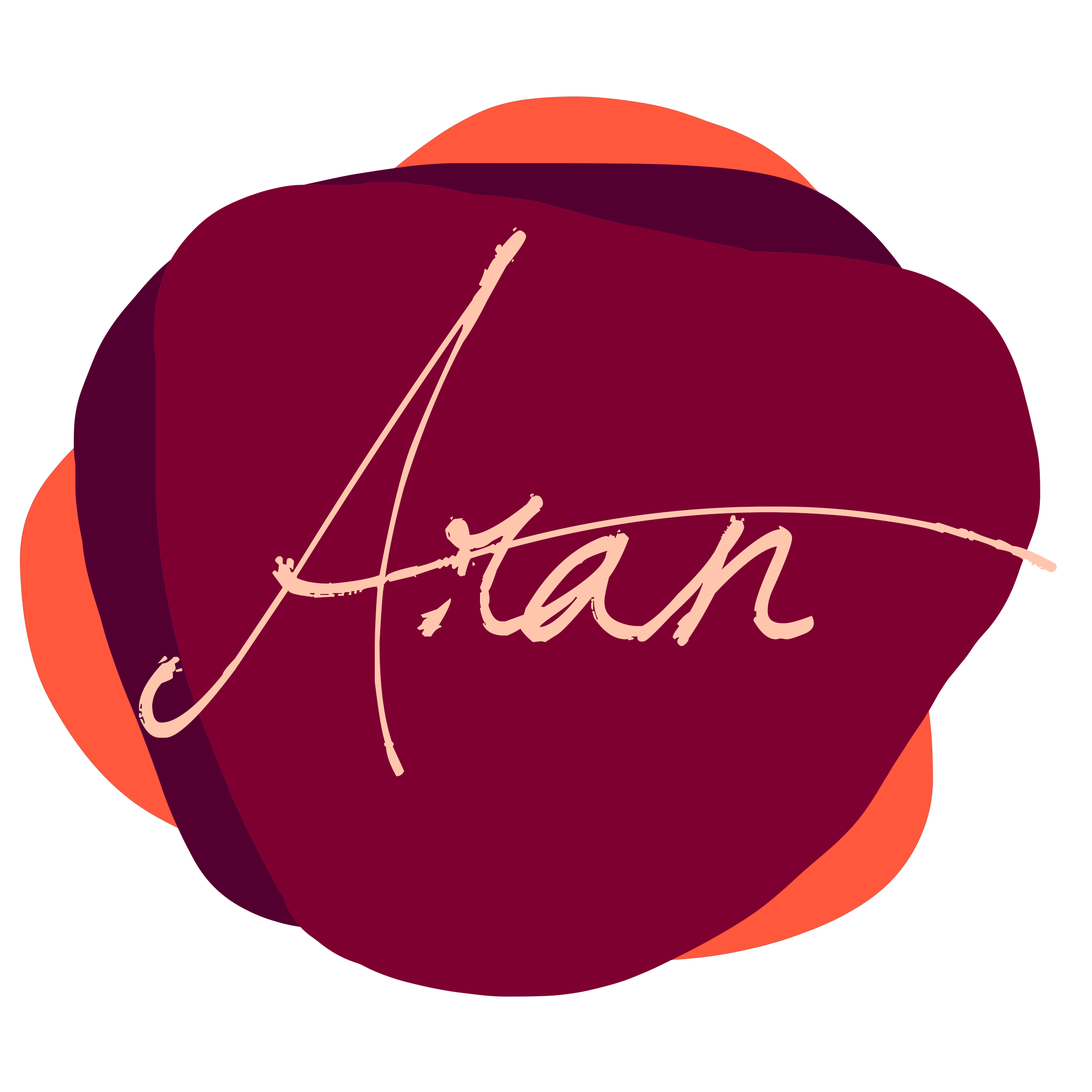
<style>
.page{position:relative;width:1092px;height:1092px;background:#7d0031}
.page>*{position:absolute;margin:0}
.t1{font:480.8px "JellykaBeesAntiqueHandwriting";color:#ffc6ad}
</style>
<div class="page">
<p class="t1" style="left:139px;top:228px;width:918px;height:548px">Aran</p>
</div>
